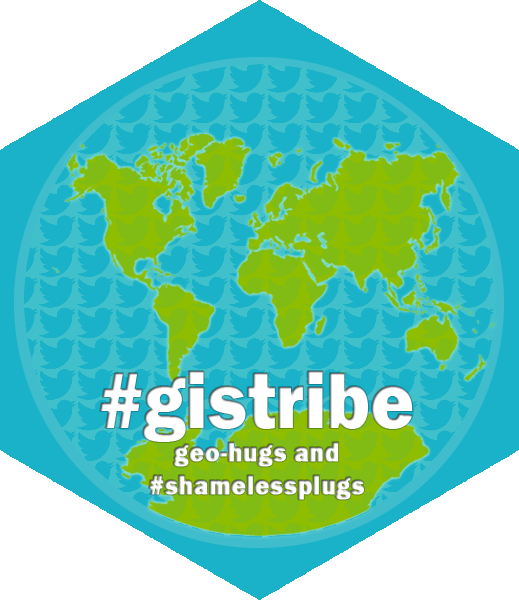
<style>
.page{position:relative;width:519px;height:600px;background:#1ab2c8}
.page>*{position:absolute;margin:0}
.t1{font:27.5px/33.3px "FranklinGothic-Heavy";color:#ffffff;font-weight:bold;scale:0.91 1}
.t2{font:82.5px/7.1px "FranklinGothic-Heavy";color:#ffffff;scale:0.91 1}
.t3{font:27.5px/7.1px "FranklinGothic-Heavy";color:#ffffff;font-weight:bold;scale:0.91 1}
</style>
<div class="page">
<p class="t1" style="left:100px;top:371px;width:313px;height:129px;text-align:center"><span class="t2">#gistribe<br></span>geo-hugs and<br>#shamelessplug<span class="t3">s</span></p>
</div>
